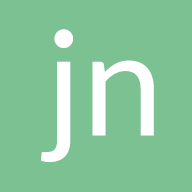
<style>
.page{position:relative;width:192px;height:192px;background:#7bc192}
.page>*{position:absolute;margin:0}
.t1{font:145px "Lato-Regular";color:#ffffff}
</style>
<div class="page">
<p class="t1" style="left:41px;top:29px;width:113px;height:133px">jn</p>
</div>
